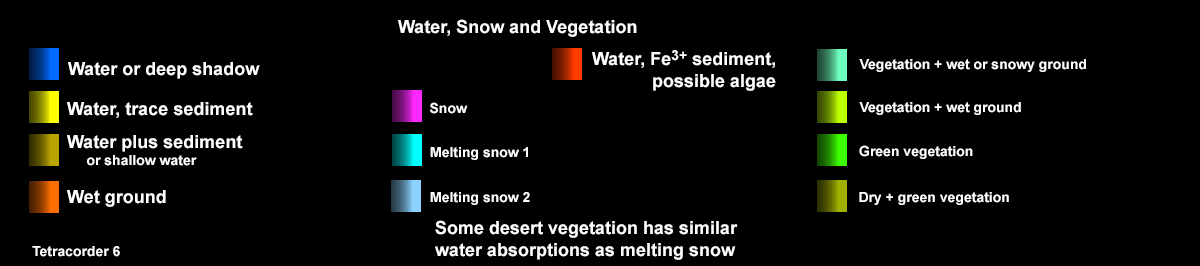
<style>
.page{position:relative;width:1200px;height:266px;background:#000000}
.page>*{position:absolute;margin:0}
.t1{font:18px "Arial-BoldMT";color:#fffefe}
.t2{font:14px "Arial-BoldMT";color:#fffefe}
.t3{font:14px "Arial-BoldMT";color:#ffff00}
</style>
<div class="page">
<p class="t1" style="left:398px;top:19px;width:239px;height:18px">Water, Snow and Vegetation</p>
<p class="t1" style="left:592px;top:50px;width:184px;height:41px">Water, Fe<span class="t2">3+</span> sediment,<br>            possible algae</p>
<p class="t1" style="left:68px;top:62px;width:192px;height:17px">Water or deep shadow</p>
<p class="t2" style="left:859px;top:59px;width:227px;height:13px">Vegetation + wet or snowy ground</p>
<p class="t1" style="left:67px;top:102px;width:186px;height:16px">Water, trace sediment</p>
<p class="t2" style="left:430px;top:102px;width:38px;height:12px">Snow</p>
<p class="t2" style="left:859px;top:102px;width:162px;height:13px">Vegetation + wet ground</p>
<p class="t1" style="left:67px;top:135px;width:176px;height:31px">Water plus sediment<br>     <span class="t3">or shallow water</span></p>
<p class="t2" style="left:430px;top:147px;width:98px;height:13px">Melting snow 1</p>
<p class="t2" style="left:859px;top:145px;width:114px;height:14px">Green vegetation</p>
<p class="t1" style="left:67px;top:190px;width:99px;height:17px">Wet ground</p>
<p class="t2" style="left:430px;top:192px;width:100px;height:13px">Melting snow 2</p>
<p class="t2" style="left:859px;top:192px;width:150px;height:13px">Dry + green vegetation</p>
<p class="t1" style="left:435px;top:220px;width:303px;height:40px">Some desert vegetation has similar<br>water absorptions as melting snow</p>
<p class="t2" style="left:32px;top:246px;width:88px;height:11px">Tetracorder 6</p>
</div>
